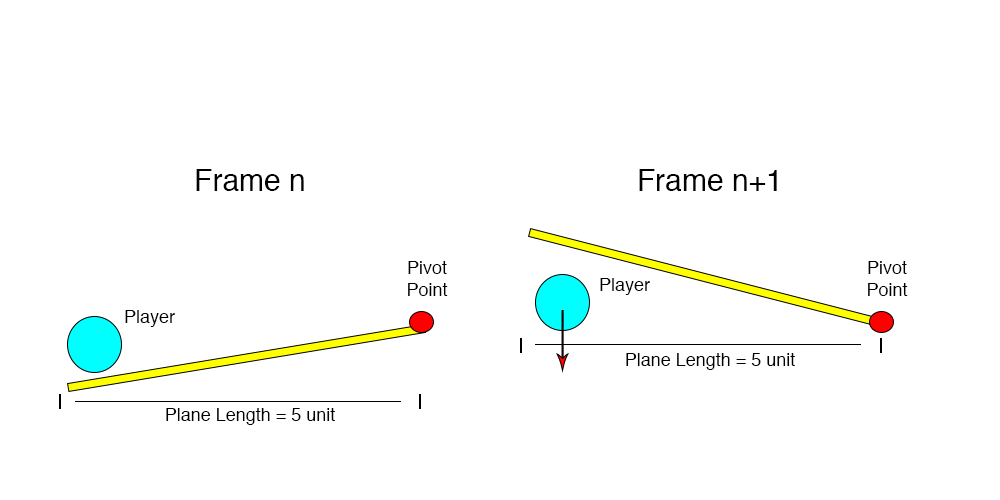
<style>
.page{position:relative;width:1000px;height:500px;background:#ffffff}
.page>*{position:absolute;margin:0}
.t1{font:30px "Helvetica";color:#000000}
.t2{font:18px "Helvetica";color:#000000}
</style>
<div class="page">
<p class="t1" style="left:196px;top:169px;width:108px;height:22px">Frame n</p>
<p class="t1" style="left:639px;top:169px;width:138px;height:22px">Frame n+1</p>
<p class="t2" style="left:408px;top:261px;width:40px;height:35px;text-align:center">Pivot Point</p>
<p class="t2" style="left:868px;top:261px;width:40px;height:35px;text-align:center">Pivot Point</p>
<p class="t2" style="left:600px;top:278px;width:50px;height:17px">Player</p>
<p class="t2" style="left:125px;top:310px;width:50px;height:17px">Player</p>
<p class="t2" style="left:626px;top:353px;width:169px;height:17px">Plane Length = 5 unit</p>
<p class="t2" style="left:166px;top:408px;width:169px;height:17px">Plane Length = 5 unit</p>
</div>
